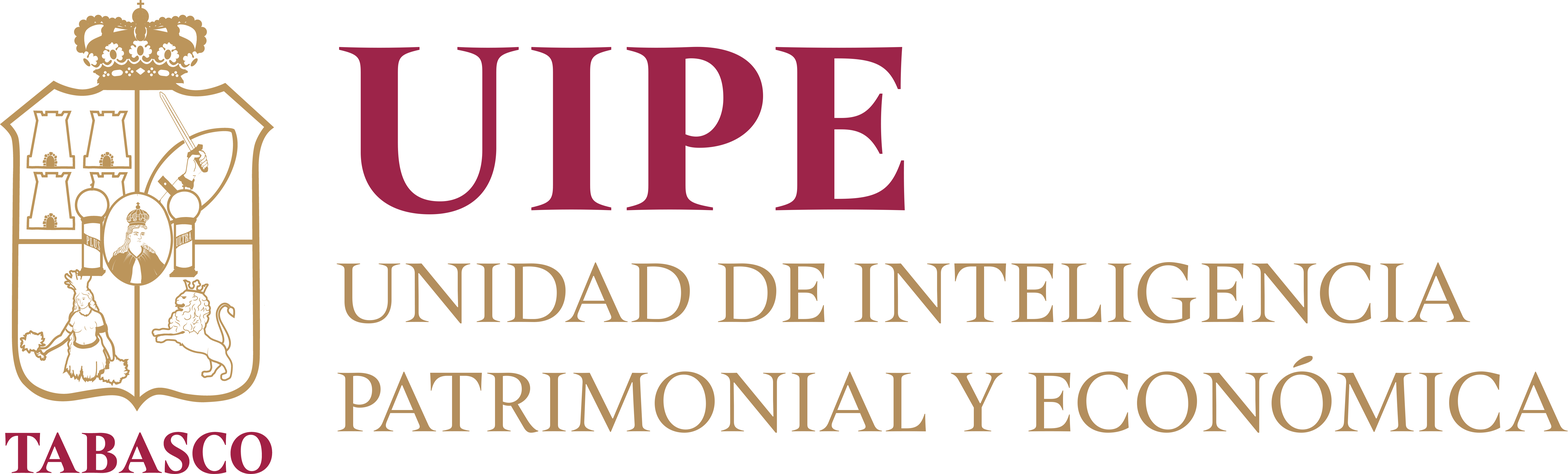
<style>
.page{position:relative;width:1568px;height:474px;background:#ffffff}
.page>*{position:absolute;margin:0}
.t1{font:254.4px "Hermann-Heavy";color:#9d2449}
.t2{font:91.2px "Hermann-Regular";color:#b38e5d}
</style>
<div class="page">
<p class="t1" style="left:339px;top:47px;width:566px;height:168px">UIPE</p>
<p class="t2" style="left:337px;top:262px;width:1231px;height:171px">UNIDAD DE INTELIGENCIA<br>PATRIMONIAL Y ECONÓMICA</p>
</div>
